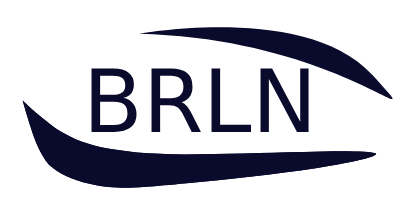
<style>
.page{position:relative;width:400px;height:200px;background:#ffffff}
.page>*{position:absolute;margin:0}
.t1{font:87px "DejaVuSans";color:#090a2c}
</style>
<div class="page">
<p class="t1" style="left:91px;top:68px;width:218px;height:64px">BRLN</p>
</div>
